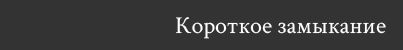
<style>
.page{position:relative;width:403px;height:50px;background:#333333}
.page>*{position:absolute;margin:0}
.t1{font:24px "CrimsonText-Regular";color:#ffffff}
</style>
<div class="page">
<p class="t1" style="left:176px;top:17px;width:210px;height:22px">Короткое замыкание</p>
</div>
